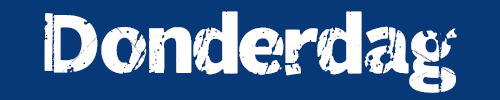
<style>
.page{position:relative;width:500px;height:100px;background:#073878}
.page>*{position:absolute;margin:0}
.t1{font:55px "321Perfect";color:#ffffff}
</style>
<div class="page">
<p class="t1" style="left:44px;top:11px;width:413px;height:82px">Donderdag</p>
</div>
